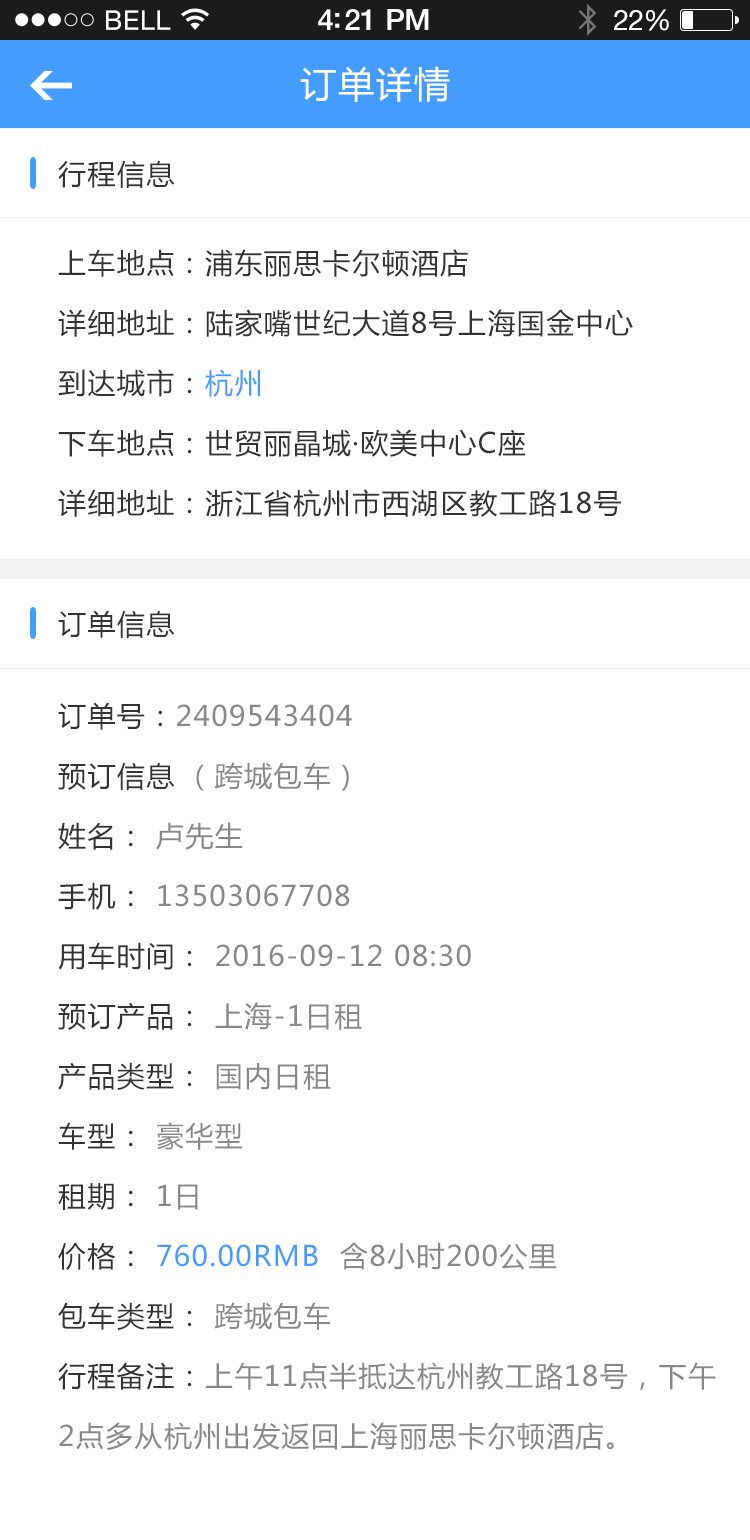
<style>
.page{position:relative;width:750px;height:1540px;background:#ffffff}
.page>*{position:absolute;margin:0}
.t1{font:36px "MicrosoftYaHei";letter-spacing:0.05em;color:#ffffff}
.t2{font:28px "MicrosoftYaHei";letter-spacing:0.05em;color:#333333}
.t3{font:28px/60px "MicrosoftYaHei";letter-spacing:0.05em;color:#333333}
.t4{font:28px/60px "MicrosoftYaHei";letter-spacing:0.05em;color:#449cff}
.t5{font:28px/60px "MicrosoftYaHei";letter-spacing:0.05em;color:#888888}
</style>
<div class="page">
<p class="t1" style="left:300px;top:66px;width:150px;height:36px">订单详情</p>
<p class="t2" style="left:58px;top:160px;width:117px;height:28px">行程信息</p>
<p class="t3" style="left:58px;top:249px;width:575px;height:268px">上车地点：浦东丽思卡尔顿酒店<br>详细地址：陆家嘴世纪大道8号上海国金中心<br>到达城市：<span class="t4">杭州<br></span>下车地点：世贸丽晶城·欧美中心C座<br>详细地址：浙江省杭州市西湖区教工路18号</p>
<p class="t2" style="left:58px;top:610px;width:117px;height:28px">订单信息</p>
<p class="t5" style="left:58px;top:702px;width:658px;height:748px"><span class="t3">订单号：</span>2409543404<br><span class="t3">预订信息 </span>（跨城包车）<br><span class="t3">姓名： </span>卢先生<br><span class="t3">手机： </span>13503067708<br><span class="t3">用车时间： </span>2016-09-12 08:30<br><span class="t3">预订产品： </span>上海-1日租<br><span class="t3">产品类型： </span>国内日租<br><span class="t3">车型： </span>豪华型<br><span class="t3">租期： </span>1日<br><span class="t3">价格： </span><span class="t4">760.00RMB  </span>含8小时200公里<br><span class="t3">包车类型： </span>跨城包车<br><span class="t3">行程备注：</span>上午11点半抵达杭州教工路18号，下午<br>2点多从杭州出发返回上海丽思卡尔顿酒店。</p>
</div>
